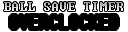
<style>
.page{position:relative;width:128px;height:32px;background:#010101}
.page>*{position:absolute;margin:0}
.t1{font:12px "Terminal"}
</style>
<div class="page">
<p class="t1" style="left:4px;top:2px;width:119px;height:9px">BALL SAVE TIMER</p>
</div>
